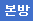
<style>
.page{position:relative;width:33px;height:21px;background:#4070cc}
.page>*{position:absolute;margin:0}
.t1{font:12px "Dotum";color:#ffffff;font-weight:bold}
</style>
<div class="page">
<p class="t1" style="left:5px;top:5px;width:25px;height:11px">본방</p>
</div>
